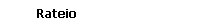
<style>
.page{position:relative;width:224px;height:27px;background:#ffffff}
.page>*{position:absolute;margin:0}
.t1{font:11.2px "Tahoma";color:#000000;font-weight:bold}
</style>
<div class="page">
<p class="t1" style="left:37px;top:9px;width:39px;height:9px">Rateio</p>
</div>
